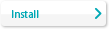
<style>
.page{position:relative;width:110px;height:30px;background:#ffffff}
.page>*{position:absolute;margin:0}
.t1{font:11px "MyriadPro-Regular";color:#00a8b5}
</style>
<div class="page">
<p class="t1" style="left:12px;top:10px;width:27px;height:8px">Install</p>
</div>
